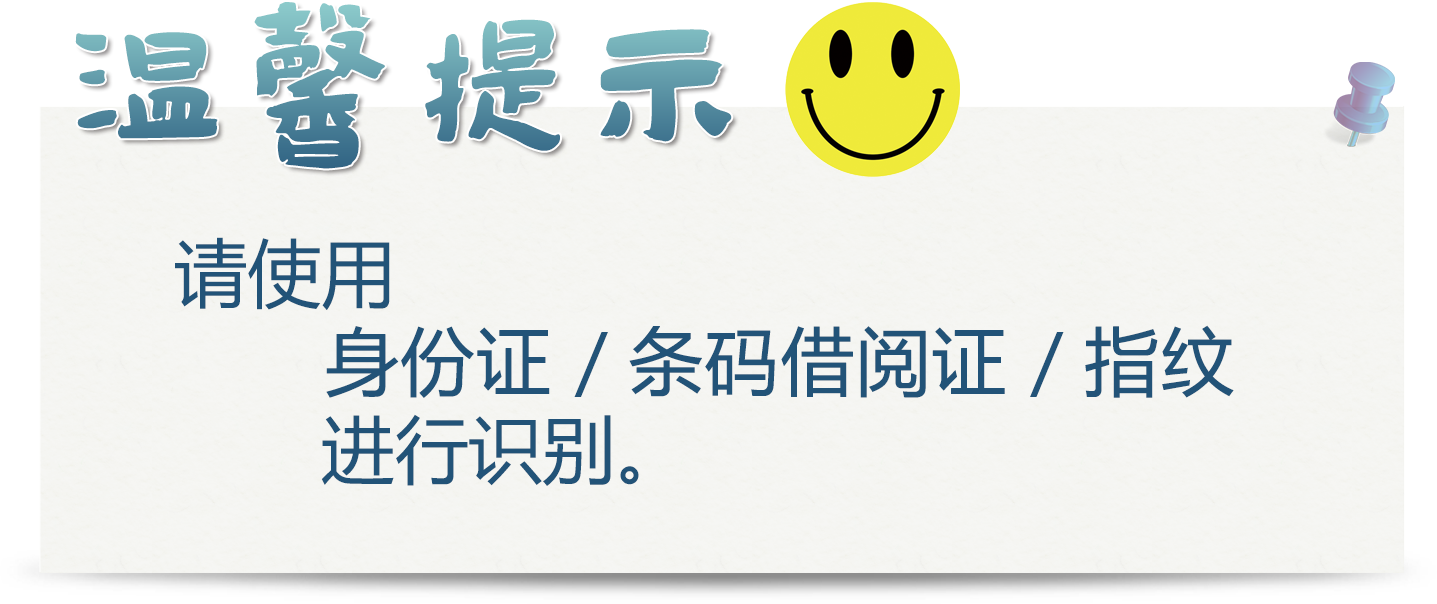
<style>
.page{position:relative;width:1437px;height:604px;background:#f5f5f2}
.page>*{position:absolute;margin:0}
.t1{font:173px "TianZhen"}
.t2{font:73.7px "MicrosoftYaHei";color:#225378;font-weight:bold}
.t3{font:73.7px "MicrosoftYaHei";color:#225378}
</style>
<div class="page">
<p class="t1" style="left:75px;top:2px;width:657px;height:167px">温馨提示</p>
<p class="t2" style="left:175px;top:237px;width:1059px;height:249px;text-align:justify"><span class="t3">请使用<br></span>　　身份证 <span class="t3">/ </span>条码借阅证 <span class="t3">/ </span>指纹<br><span class="t3">　　进行识别。</span></p>
</div>
